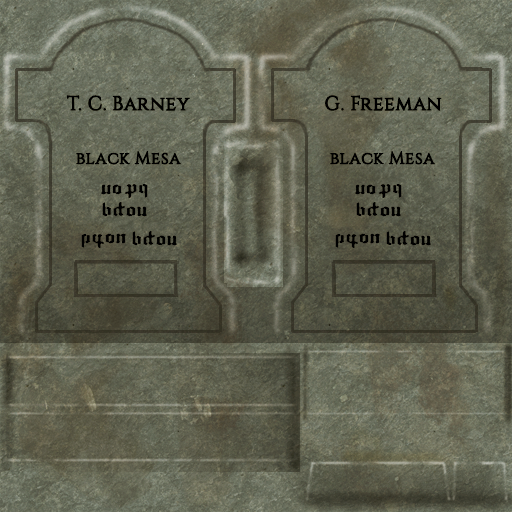
<style>
.page{position:relative;width:512px;height:512px}
.page>*{position:absolute;margin:0}
.t1{font:20.2px "Constantine";color:#000000;font-weight:bold;scale:0.97 1}
.t2{font:17.4px "Constantine";color:#000000;font-weight:bold}
</style>
<div class="page">
<p class="t1" style="left:67px;top:95px;width:123px;height:16px">T. C. Barney</p>
<p class="t1" style="left:325px;top:95px;width:117px;height:16px">G. Freeman</p>
<p class="t2" style="left:76px;top:151px;width:105px;height:14px">black Mesa</p>
<p class="t2" style="left:330px;top:151px;width:105px;height:14px">black Mesa</p>
</div>
